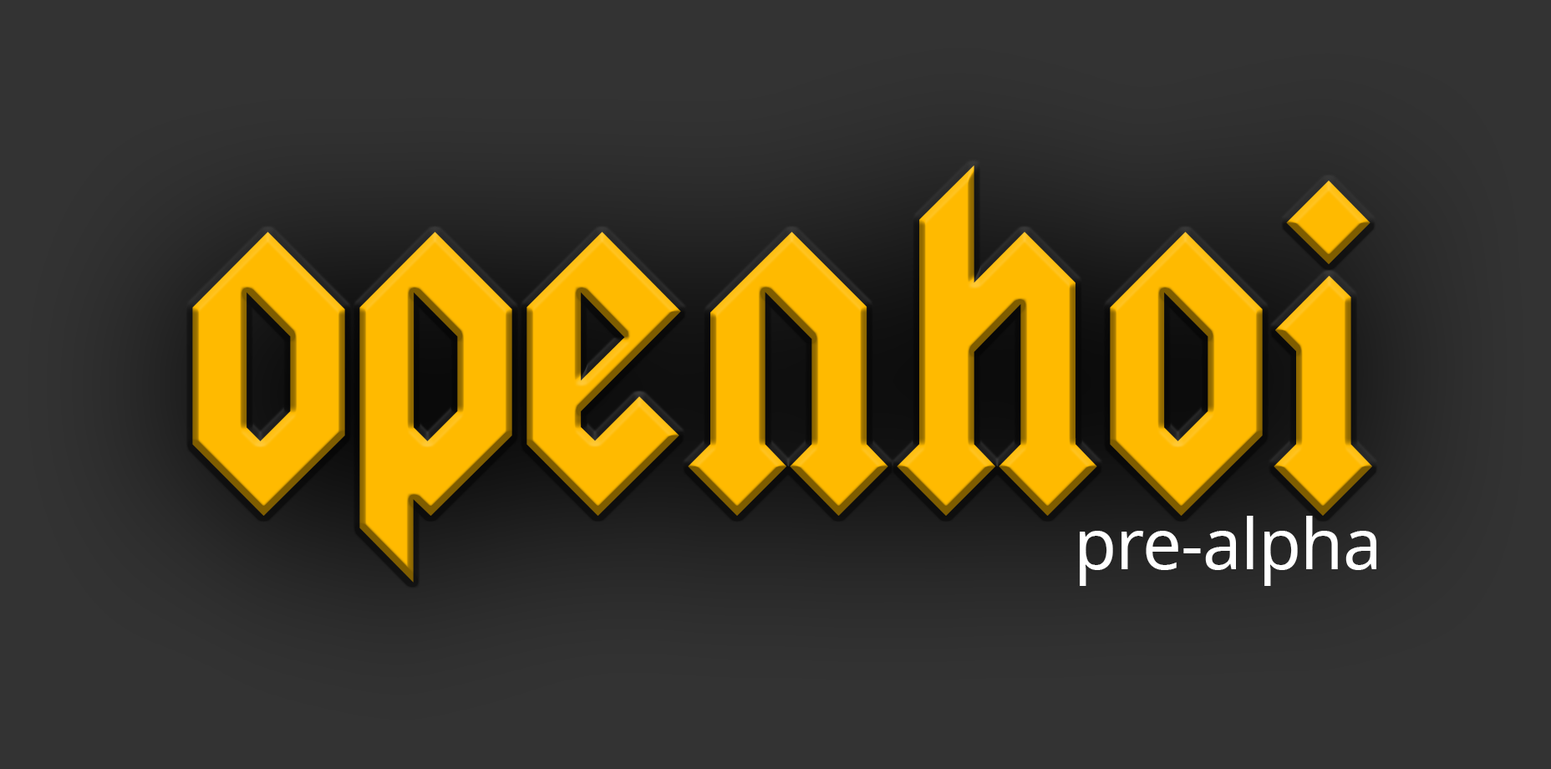
<style>
.page{position:relative;width:1551px;height:769px;background:#333333}
.page>*{position:absolute;margin:0}
.t1{font:417.8px "Squealer-Regular";letter-spacing:-0.005em;color:#ffba00}
.t2{font:69.6px "NotoSans-Regular";letter-spacing:-0.01em;color:#ffffff}
</style>
<div class="page">
<p class="t1" style="left:192px;top:165px;width:1180px;height:417px">openhoi</p>
<p class="t2" style="left:1080px;top:516px;width:296px;height:70px">pre-alpha</p>
</div>
